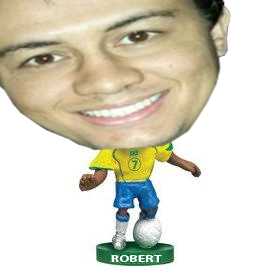
<style>
.page{position:relative;width:280px;height:280px;background:#ffffff}
.page>*{position:absolute;margin:0}
.t1{font:10px "MyriadPro-Bold";color:#ffffff;scale:1.42 1}
</style>
<div class="page">
<p class="t1" style="left:111px;top:255px;width:51px;height:7px">ROBERT</p>
</div>
